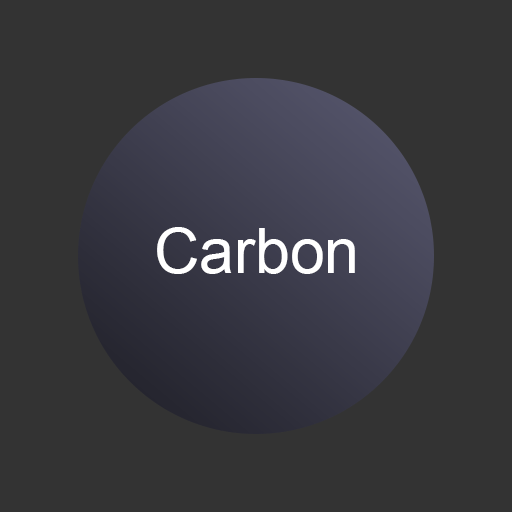
<style>
.page{position:relative;width:512px;height:512px;background:#333333}
.page>*{position:absolute;margin:0}
.t1{font:62.5px "ArialMT";color:#ffffff}
</style>
<div class="page">
<p class="t1" style="left:157px;top:227px;width:198px;height:47px">Carbon</p>
</div>
